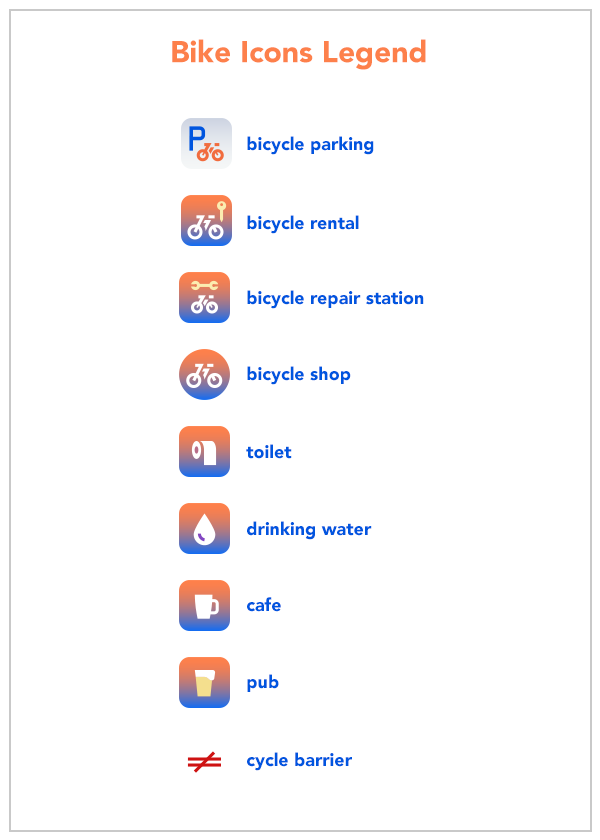
<style>
.page{position:relative;width:600px;height:840px;background:#ffffff}
.page>*{position:absolute;margin:0}
.t1{font:30px "Avenir-Black";color:#fd804b}
.t2{font:18px "Avenir-Black";color:#0055df}
</style>
<div class="page">
<p class="t1" style="left:172px;top:39px;width:254px;height:31px">Bike Icons Legend</p>
<p class="t2" style="left:247px;top:136px;width:127px;height:19px">bicycle parking</p>
<p class="t2" style="left:247px;top:215px;width:112px;height:19px">bicycle rental</p>
<p class="t2" style="left:247px;top:290px;width:177px;height:19px">bicycle repair station</p>
<p class="t2" style="left:247px;top:366px;width:104px;height:19px">bicycle shop</p>
<p class="t2" style="left:246px;top:444px;width:46px;height:15px">toilet</p>
<p class="t2" style="left:247px;top:521px;width:125px;height:19px">drinking water</p>
<p class="t2" style="left:247px;top:597px;width:34px;height:15px">cafe</p>
<p class="t2" style="left:247px;top:674px;width:32px;height:18px">pub</p>
<p class="t2" style="left:247px;top:752px;width:105px;height:19px">cycle barrier</p>
</div>
